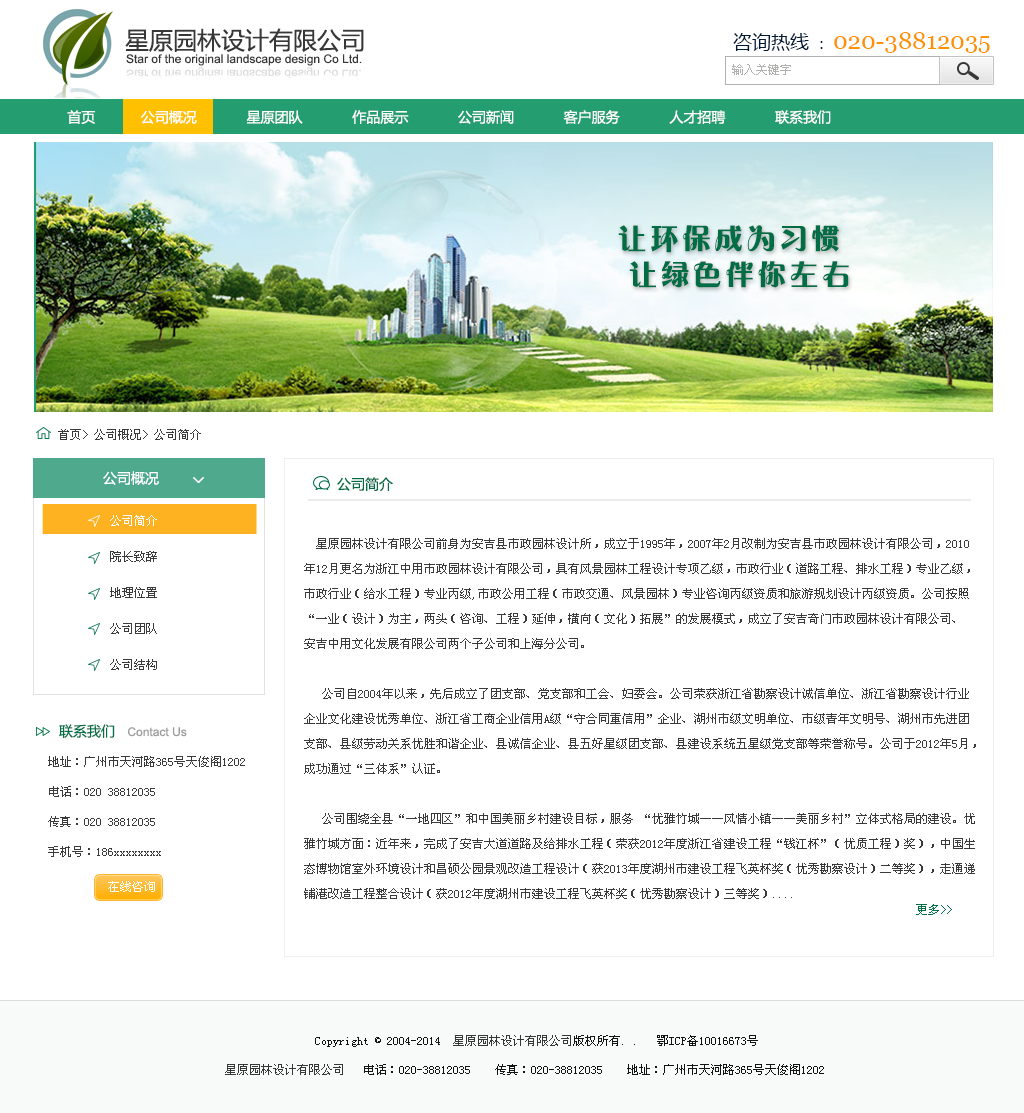
<style>
.page{position:relative;width:1024px;height:1113px;background:#ffffff}
.page>*{position:absolute;margin:0}
.t1{font:24px "MicrosoftYaHei";color:#373737}
.t2{font:24px "Georgia";color:#ff9000}
.t3{font:19px "MicrosoftYaHei";color:#001937}
.t4{font:14px "MicrosoftYaHei";color:#001937}
.t5{font:12px "ArialMT";color:#373737}
.t6{font:12px "SimSun";color:#b1b1b0}
.t7{font:11.8px "ArialMT";color:#dcdcdc}
.t8{font:14px "MicrosoftYaHei";color:#ffffff}
.t9{font:30px/36px "FZCHYJW--GB1-0";letter-spacing:0.075em;color:#006d44}
.t10{font:12px "SimSun";color:#3a3a3a}
.t11{font:14px "MicrosoftYaHei";color:#006d44}
.t12{font:12px/36px "SimSun";color:#3a3a3a}
.t13{font:12px/36px "SimSun";color:#ffffff}
.t14{font:12px/25px "SimSun";color:#3a3a3a}
.t15{font:12px/25px "SimSun";color:#006d44}
.t16{font:12px "ArialMT";color:#9c9c9c}
.t17{font:14px "MicrosoftYaHei";color:#007245}
.t18{font:12px/30px "SimSun";color:#3a3a3a}
.t19{font:12px "SimSun";color:#ffffff}
.t20{font:12px "SimSun";color:#006d44}
.t21{font:12px "SimSun";color:#131313}
.t22{font:12px "SimSun";color:#373737}
</style>
<div class="page">
<p class="t1" style="left:125px;top:28px;width:239px;height:24px">星原园林设计有限公司</p>
<p class="t2" style="left:733px;top:32px;width:257px;height:21px"><span class="t3">咨询热线 </span><span class="t4">： </span>020-38812035</p>
<p class="t5" style="left:126px;top:54px;width:236px;height:12px">Star of the original landscape design Co Ltd.</p>
<p class="t6" style="left:732px;top:64px;width:59px;height:11px">输入关键字</p>
<p class="t7" style="left:126px;top:67px;width:235px;height:12px">Star of the original landscape design Co Ltd.</p>
<p class="t8" style="left:67px;top:110px;width:764px;height:14px">首页           公司概况            星原团队            作品展示            公司新闻            客户服务            人才招聘            联系我们</p>
<p class="t9" style="left:618px;top:225px;width:231px;height:63px;text-align:justify">让环保成为习惯<br> 让绿色伴你左右</p>
<p class="t10" style="left:58px;top:429px;width:143px;height:11px">首页&gt; 公司概况&gt; 公司简介</p>
<p class="t8" style="left:103px;top:471px;width:56px;height:14px">公司概况</p>
<p class="t11" style="left:337px;top:477px;width:56px;height:15px">公司简介</p>
<p class="t12" style="left:110px;top:515px;width:47px;height:155px;text-align:justify"><span class="t13">公司简介<br></span>院长致辞<br>地理位置<br>公司团队<br>公司结构</p>
<p class="t14" style="left:304px;top:538px;width:672px;height:361px;text-align:justify"><span class="t15">  </span>星原园林设计有限公司前身为安吉县市政园林设计所，成立于1995年，2007年2月改制为安吉县市政园林设计有限公司，2010<br>年12月更名为浙江中用市政园林设计有限公司，具有风景园林工程设计专项乙级，市政行业（道路工程、排水工程）专业乙级，<br>市政行业（给水工程）专业丙级,市政公用工程（市政交通、风景园林）专业咨询丙级资质和旅游规划设计丙级资质。公司按照<br>“一业（设计）为主，两头（咨询、工程）延伸，横向（文化）拓展”的发展模式，成立了安吉奇门市政园林设计有限公司、<br>安吉中用文化发展有限公司两个子公司和上海分公司。<br><br>   公司自2004年以来，先后成立了团支部、党支部和工会、妇委会。公司荣获浙江省勘察设计诚信单位、浙江省勘察设计行业<br>企业文化建设优秀单位、浙江省工商企业信用A级“守合同重信用”企业、湖州市级文明单位、市级青年文明号、湖州市先进团<br>支部、县级劳动关系优胜和谐企业、县诚信企业、县五好星级团支部、县建设系统五星级党支部等荣誉称号。公司于2012年5月，<br>成功通过“三体系”认证。<br><br>   公司围绕全县“一地四区”和中国美丽乡村建设目标，服务 “优雅竹城——风情小镇——美丽乡村”立体式格局的建设。优<br>雅竹城方面：近年来，完成了安吉大道道路及给排水工程（荣获2012年度浙江省建设工程“钱江杯”（优质工程）奖），中国生<br>态博物馆室外环境设计和昌硕公园景观改造工程设计（获2013年度湖州市建设工程飞英杯奖（优秀勘察设计）二等奖），走通递<br>铺港改造工程整合设计（获2012年度湖州市建设工程飞英杯奖（优秀勘察设计）三等奖）....</p>
<p class="t16" style="left:59px;top:724px;width:128px;height:14px"><span class="t17">联系我们   </span>Contact Us</p>
<p class="t18" style="left:48px;top:756px;width:197px;height:101px;text-align:justify">地址：广州市天河路365号天俊阁1202<br>电话：020 38812035<br>传真：020 38812035<br>手机号：186xxxxxxxx</p>
<p class="t19" style="left:108px;top:881px;width:47px;height:11px">在线咨询</p>
<p class="t20" style="left:916px;top:904px;width:36px;height:11px">更多&gt;&gt;</p>
<p class="t21" style="left:315px;top:1035px;width:443px;height:12px">Copyright © 2004-2014  <span class="t22">星原园林设计有限公司</span>版权所有. .   鄂ICP备10016673号</p>
<p class="t21" style="left:225px;top:1064px;width:599px;height:11px"><span class="t22">星原园林设计有限公司</span>   电话：020-38812035    传真：020-38812035    地址：广州市天河路365号天俊阁1202</p>
</div>
